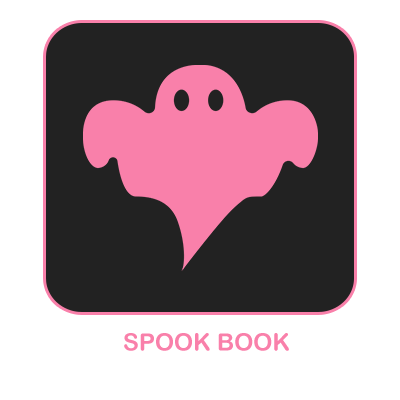
<style>
.page{position:relative;width:400px;height:400px;background:#ffffff}
.page>*{position:absolute;margin:0}
.t1{font:24px "ArialRoundedMTBold";color:#f980aa}
</style>
<div class="page">
<p class="t1" style="left:124px;top:333px;width:165px;height:18px">SPOOK BOOK</p>
</div>
